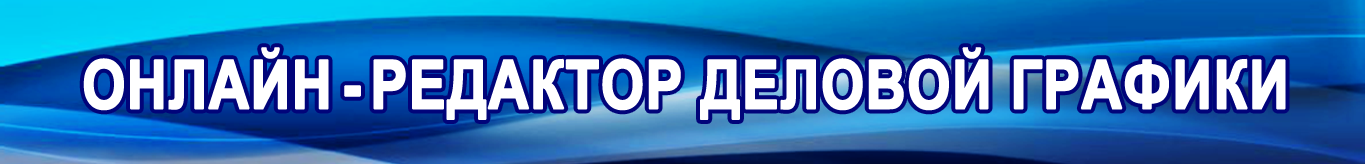
<style>
.page{position:relative;width:1365px;height:164px}
.page>*{position:absolute;margin:0}
.t1{font:67.4px "Arial-BoldMT";color:#ffffff;text-transform:uppercase;font-weight:bold;scale:0.82 1}
</style>
<div class="page">
<p class="t1" style="left:83px;top:47px;width:1203px;height:73px">Онлайн - редактор деловой графики</p>
</div>
